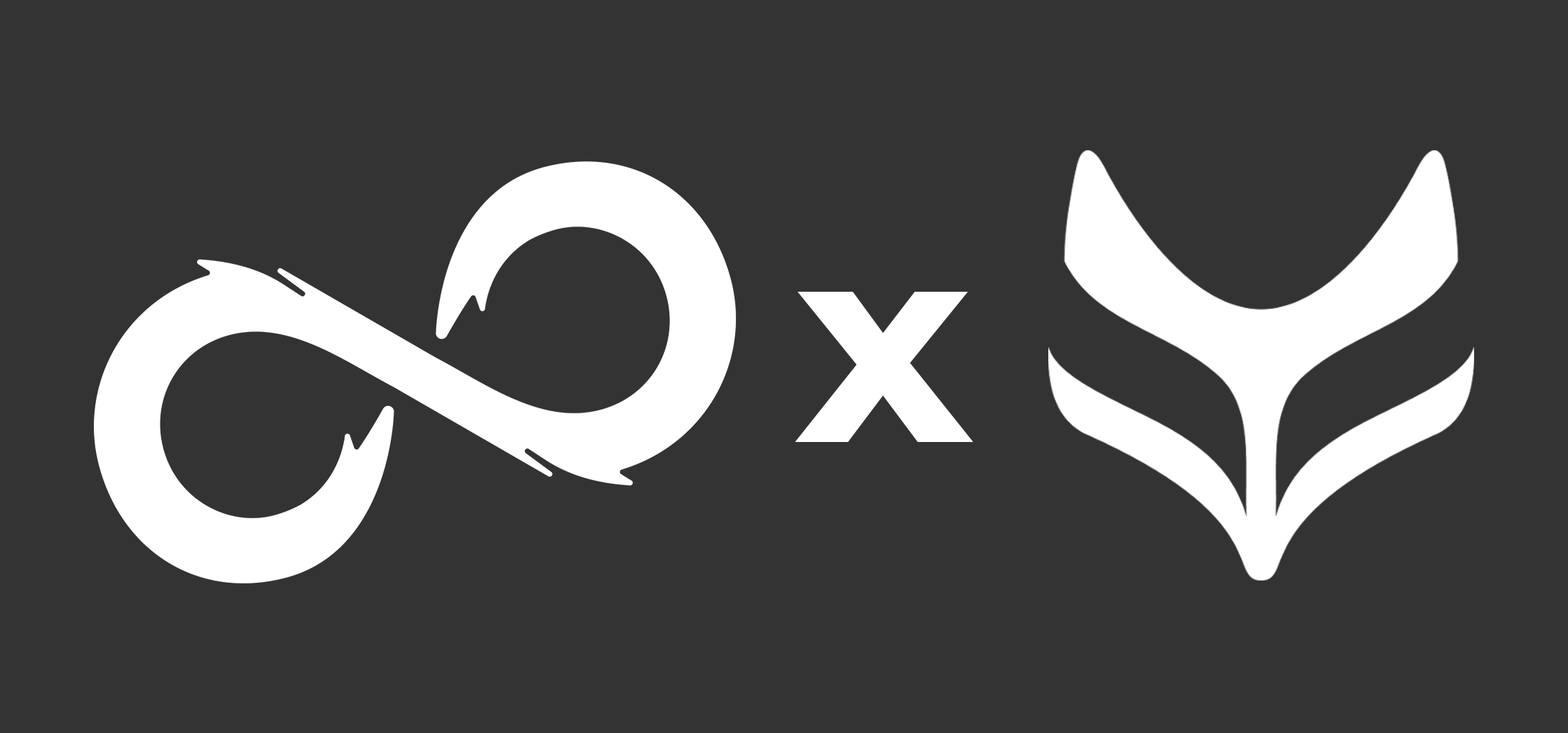
<style>
.page{position:relative;width:1568px;height:733px;background:#333333}
.page>*{position:absolute;margin:0}
.t1{font:289.7px "Arial-BoldMT";color:#ffffff;scale:1.14 1}
</style>
<div class="page">
<p class="t1" style="left:795px;top:292px;width:178px;height:150px">x</p>
</div>
